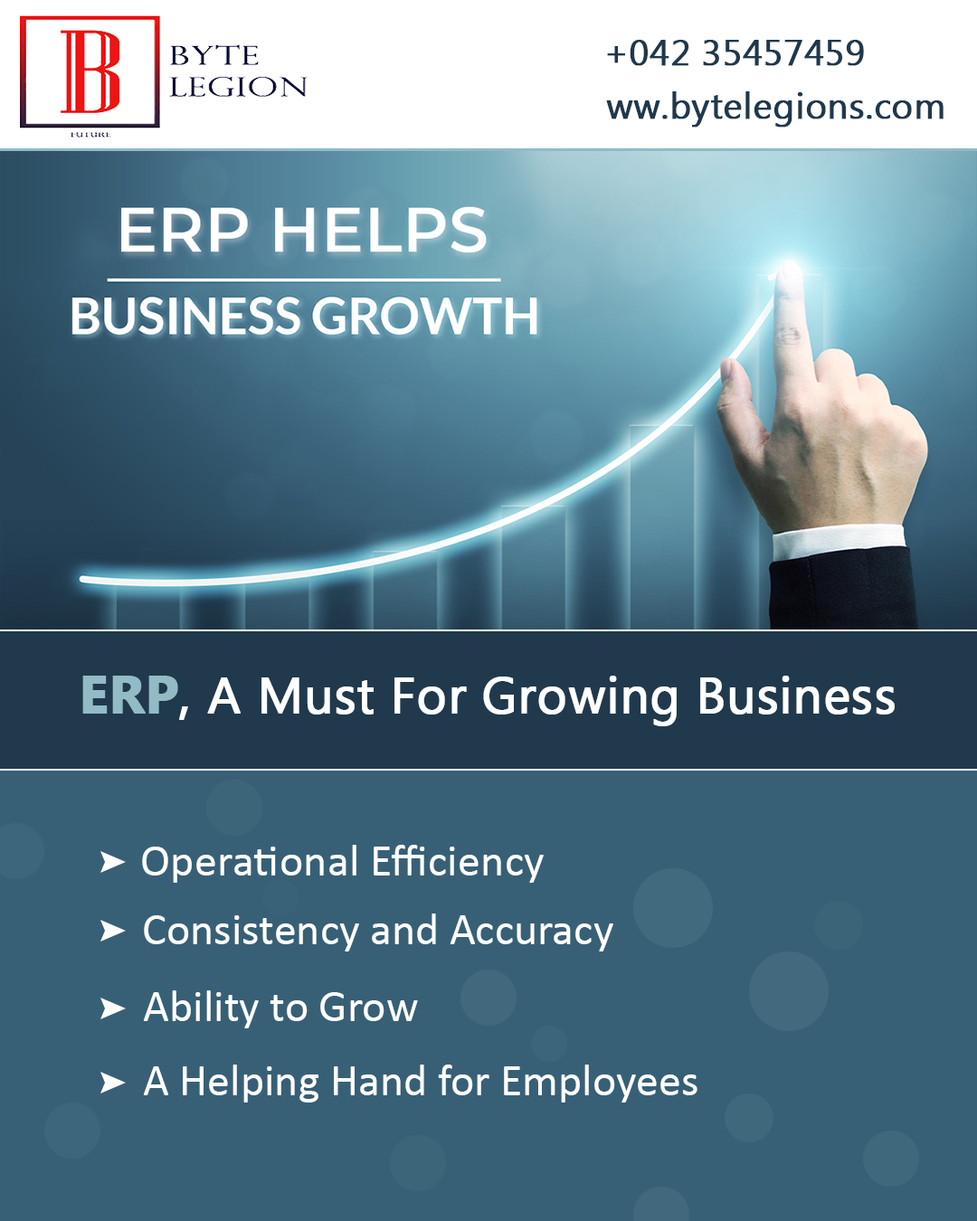
<style>
.page{position:relative;width:977px;height:1221px;background:#376076}
.page>*{position:absolute;margin:0}
.t1{font:36.2px "MyanmarText";color:#1f384c;font-weight:bold}
.t2{font:50.6px "MyanmarText";color:#ffffff;font-weight:bold}
.t3{font:53px "MyanmarText-Bold";color:#92bbc5;text-transform:uppercase;font-weight:bold}
.t4{font:53px "MyanmarText";color:#ffffff;text-transform:uppercase;font-weight:bold}
.t5{font:45.2px "Calibri";letter-spacing:0.005em;color:#ffffff}
.t6{font:45.2px "Calibri";color:#ffffff}
</style>
<div class="page">
<p class="t1" style="left:607px;top:40px;width:257px;height:26px">+042 35457459</p>
<p class="t1" style="left:606px;top:91px;width:337px;height:37px">ww.bytelegions.com</p>
<p class="t2" style="left:82px;top:676px;width:812px;height:50px"><span class="t3">ERP</span><span class="t4">, </span>A Must For Growing Business</p>
<p class="t5" style="left:142px;top:845px;width:402px;height:38px">Operational Efficiency</p>
<p class="t6" style="left:144px;top:913px;width:469px;height:38px">Consistency and Accuracy</p>
<p class="t6" style="left:143px;top:990px;width:275px;height:38px">Ability to Grow</p>
<p class="t6" style="left:143px;top:1064px;width:554px;height:38px">A Helping Hand for Employees</p>
</div>
